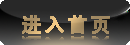
<style>
.page{position:relative;width:130px;height:45px;background:#282828}
.page>*{position:absolute;margin:0}
.t1{font:20px "SimHei";letter-spacing:0.1em;font-weight:bold}
</style>
<div class="page">
<p class="t1" style="left:22px;top:15px;width:88px;height:19px">进入首页</p>
</div>
